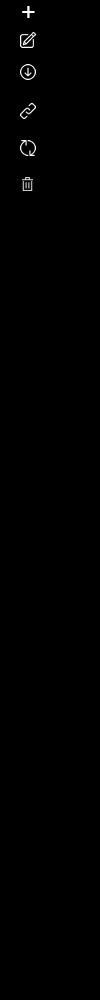
<style>
.page{position:relative;width:100px;height:1000px;background:#000000}
.page>*{position:absolute;margin:0}
.t1{font:24px "MicrosoftYaHei";color:#ffffff;text-transform:uppercase}
</style>
<div class="page">
<p class="t1" style="left:22px;top:6px;width:13px;height:12px">＋</p>
</div>
